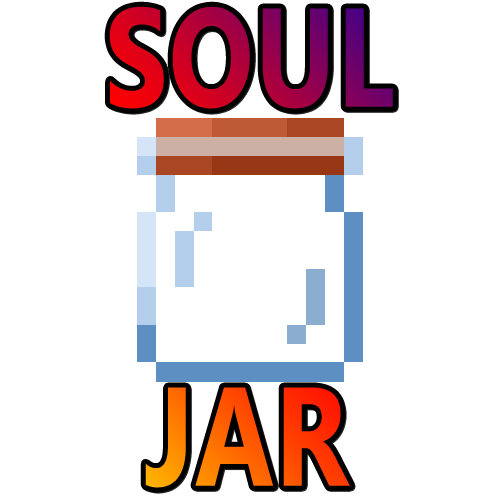
<style>
.page{position:relative;width:500px;height:500px;background:#ffffff}
.page>*{position:absolute;margin:0}
.t1{font:140px "Ebrima-Bold";letter-spacing:0.01em;scale:0.8 1}
</style>
<div class="page">
<p class="t1" style="left:109px;top:6px;width:284px;height:103px">SOUL</p>
<p class="t1" style="left:145px;top:387px;width:205px;height:101px">JAR</p>
</div>
